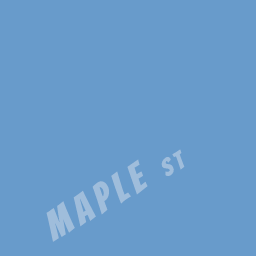
<style>
.page{position:relative;width:256px;height:256px;background:#689bcb}
.page>*{position:absolute;margin:0}
.t1{font:40px "Bangers-Regular";letter-spacing:0.16em;color:#9fbddb}
.t2{font:24px "Bangers-Regular";letter-spacing:0.16em;color:#9fbddb}
</style>
<div class="page">
<p class="t1" style="left:46px;top:149px;width:139px;height:93px;rotate:-30deg">MAPLE <span class="t2">ST</span></p>
</div>
